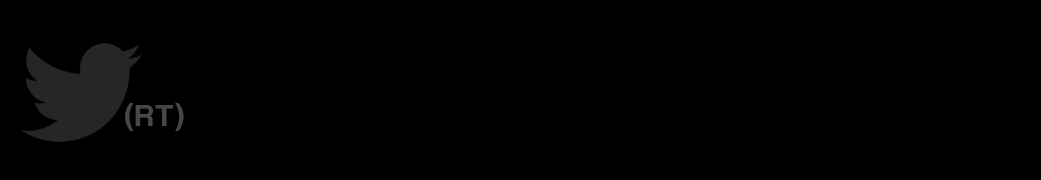
<style>
.page{position:relative;width:1041px;height:180px;background:#000000}
.page>*{position:absolute;margin:0}
.t1{font:31.9px "CoolveticaRg-Regular";letter-spacing:0.06em;color:#474747}
</style>
<div class="page">
<p class="t1" style="left:125px;top:103px;width:59px;height:28px">(RT)</p>
</div>
